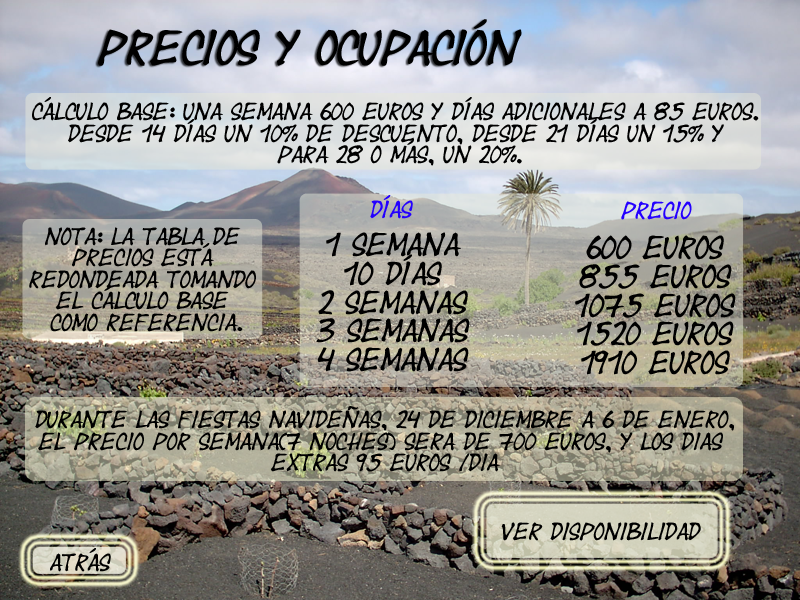
<style>
.page{position:relative;width:800px;height:600px}
.page>*{position:absolute;margin:0}
.t1{font:36px "Yearsupplyoffairycakes";color:#000000}
.t2{font:18px "Yearsupplyoffairycakes";color:#000000}
.t3{font:18px "Yearsupplyoffairycakes";color:#2400ff}
.t4{font:24px "Yearsupplyoffairycakes";color:#000000}
</style>
<div class="page">
<p class="t1" style="left:98px;top:19px;width:424px;height:47px">precios y ocupación</p>
<p class="t2" style="left:32px;top:97px;width:727px;height:69px;text-align:center">Cálculo base: Una semana 600 euros y días adicionales a 85 euros. <br>Desde 14 días un 10% de descuento, desde 21 días un 15% y <br>para 28 o más, un 20%.</p>
<p class="t3" style="left:370px;top:195px;width:43px;height:24px">días</p>
<p class="t3" style="left:621px;top:201px;width:71px;height:19px">precio</p>
<p class="t2" style="left:29px;top:227px;width:227px;height:105px;text-align:center">Nota: la tabla de <br>precios está <br>redondeada tomando <br>el cálculo base <br>como referencia.</p>
<p class="t4" style="left:316px;top:232px;width:154px;height:140px;text-align:center">1 semana<br>10 días<br>2 semanas<br>3 semanas<br>4 semanas</p>
<p class="t4" style="left:575px;top:235px;width:161px;height:140px;text-align:center">600 euros<br>855 euros<br>1075 euros<br>1520 euros<br>1910 euros</p>
<p class="t2" style="left:35px;top:406px;width:699px;height:66px;text-align:center">durante las fiestas navideñas, 24 de diciembre a 6 de enero,<br>el precio por semana(7 noches) sera de 700 euros, y los dias <br>extras 95 euros /dia</p>
<p class="t2" style="left:501px;top:522px;width:200px;height:19px">Ver disponibilidad</p>
<p class="t2" style="left:50px;top:548px;width:61px;height:24px">atrás</p>
</div>
